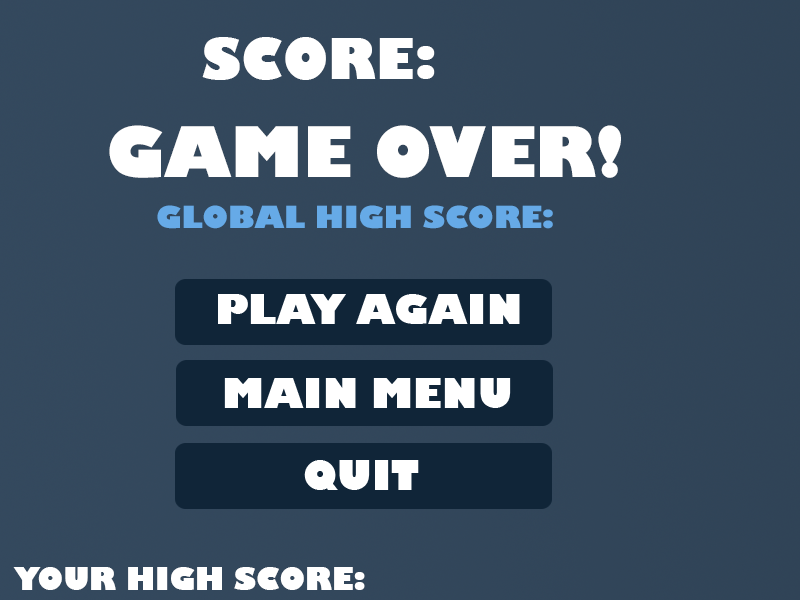
<style>
.page{position:relative;width:800px;height:600px}
.page>*{position:absolute;margin:0}
.t1{font:55px "GillSans-UltraBold";color:#ffffff}
.t2{font:68.3px "GillSans-UltraBold";color:#ffffff}
.t3{font:29.8px "GillSans-UltraBold";color:#66aae7}
.t4{font:30px "GillSans-UltraBold";color:#ffffff}
</style>
<div class="page">
<p class="t1" style="left:202px;top:37px;width:233px;height:43px">SCORE:</p>
<p class="t2" style="left:109px;top:125px;width:512px;height:53px">GAME OVER!</p>
<p class="t3" style="left:157px;top:205px;width:396px;height:24px">GLOBAL HIGH SCORE:</p>
<p class="t4" style="left:13px;top:567px;width:352px;height:23px">YOUR HIGH SCORE:</p>
</div>
